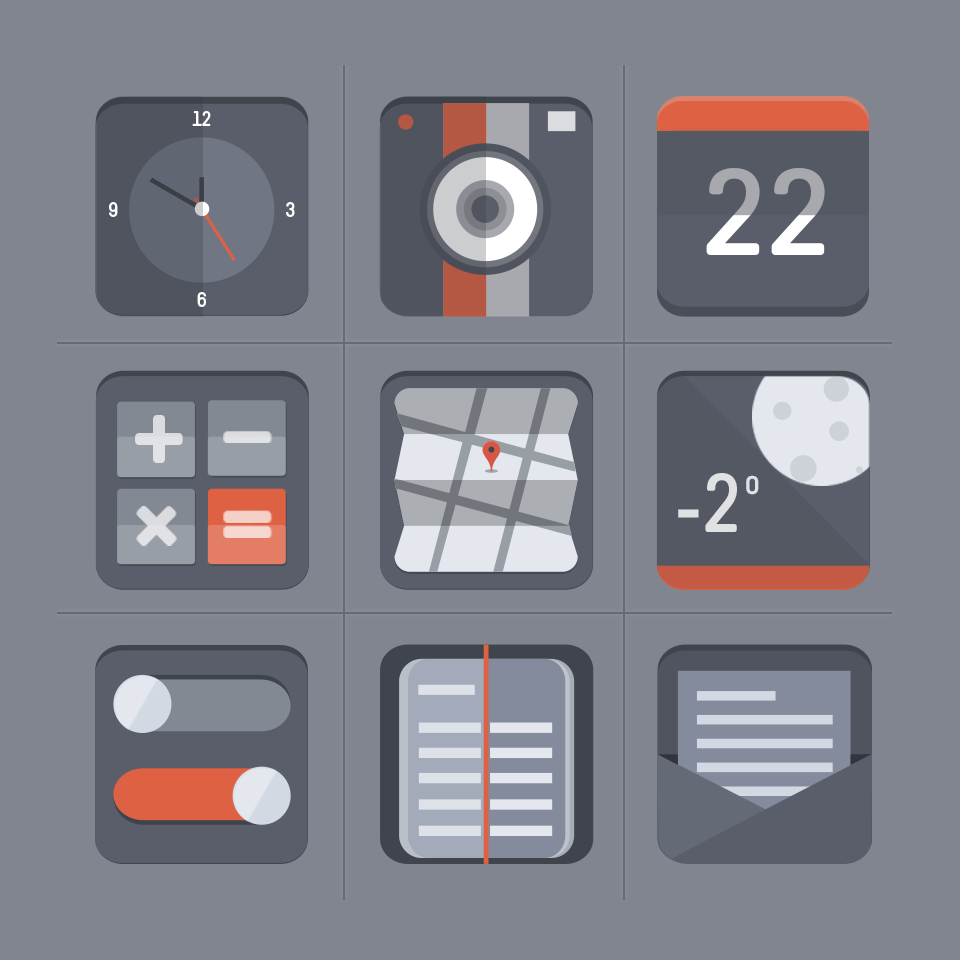
<style>
.page{position:relative;width:960px;height:960px;background:#818590}
.page>*{position:absolute;margin:0}
.t1{font:21.4px "Melbourne-Bold";color:#ffffff}
.t2{font:123.4px "Melbourne-Bold";scale:1.14 1}
.t3{font:143.2px "Melbourne-Bold";color:#e0e2e5}
.t4{font:83.5px "GillSans";color:#e0e1e2}
.t5{font:83.5px "Melbourne-Bold";color:#e0e1e2}
.t6{font:35.8px "Melbourne-Bold";color:#e0e1e2}
</style>
<div class="page">
<p class="t1" style="left:192px;top:111px;width:19px;height:15px">12</p>
<p class="t2" style="left:706px;top:168px;width:119px;height:87px">22</p>
<p class="t1" style="left:109px;top:202px;width:9px;height:15px">9</p>
<p class="t1" style="left:286px;top:202px;width:9px;height:15px">3</p>
<p class="t1" style="left:197px;top:292px;width:9px;height:15px">6</p>
<p class="t3" style="left:135px;top:415px;width:48px;height:48px">+</p>
<p class="t4" style="left:678px;top:473px;width:59px;height:59px">-<span class="t5">2</span></p>
<p class="t6" style="left:746px;top:475px;width:13px;height:20px">o</p>
</div>
